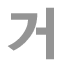
<style>
.page{position:relative;width:63px;height:67px;background:#ffffff}
.page>*{position:absolute;margin:0}
.t1{font:58.3px "YDIYGO350";color:#949494}
</style>
<div class="page">
<p class="t1" style="left:7px;top:7px;width:47px;height:53px">거</p>
</div>
